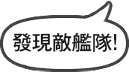
<style>
.page{position:relative;width:129px;height:72px;background:#ffffff}
.page>*{position:absolute;margin:0}
.t1{font:20px "GothicMB101Pr6N-Medium";color:#181817}
</style>
<div class="page">
<p class="t1" style="left:12px;top:32px;width:105px;height:20px">發現敵艦隊!</p>
</div>
